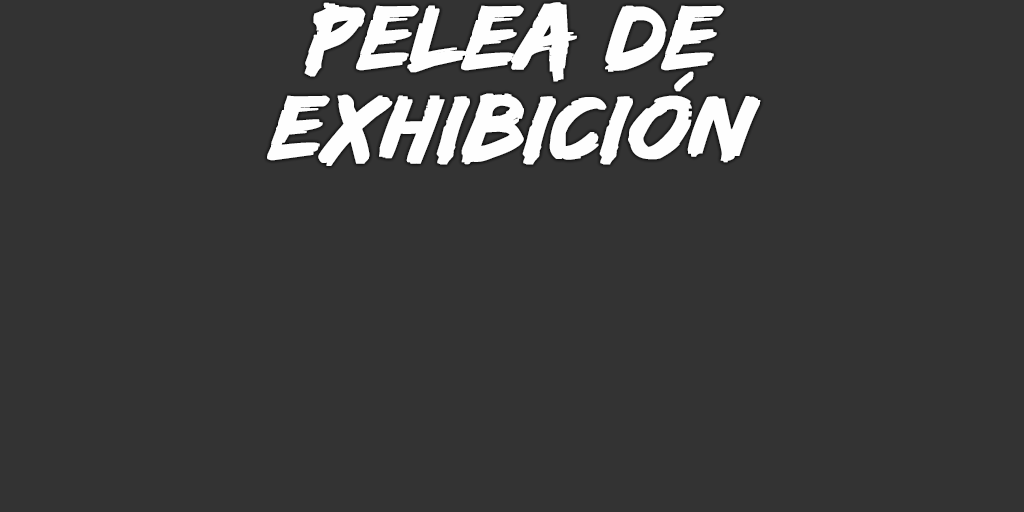
<style>
.page{position:relative;width:1024px;height:512px;background:#333333}
.page>*{position:absolute;margin:0}
.t1{font:94px/90px "EdoSZ";color:#fefefe;font-weight:bold;font-style:italic;scale:1.04 1}
</style>
<div class="page">
<p class="t1" style="left:267px;top:2px;width:494px;height:164px;text-align:center">pelea de<br>exhibición</p>
</div>
